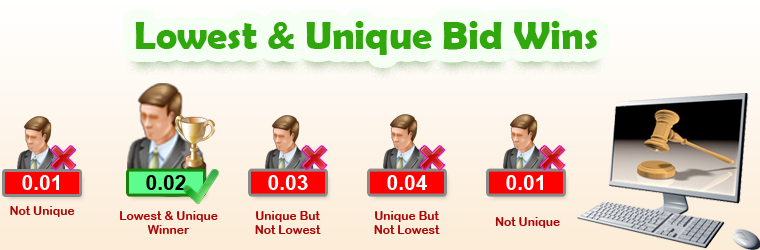
<style>
.page{position:relative;width:760px;height:250px}
.page>*{position:absolute;margin:0}
.t1{font:40px "BerlinSansFBDemi-Bold";color:#30a70c}
.t2{font:21px "Arial-BoldMT";color:#ffffff}
.t3{font:21px "Arial-BoldMT";color:#000000}
.t4{font:12px "ArialRoundedMTBold";color:#ab0707}
</style>
<div class="page">
<p class="t1" style="left:135px;top:21px;width:462px;height:34px">Lowest &amp; Unique Bid Wins</p>
<p class="t2" style="left:22px;top:175px;width:37px;height:15px">0.01</p>
<p class="t3" style="left:146px;top:175px;width:40px;height:15px">0.02</p>
<p class="t2" style="left:268px;top:175px;width:40px;height:15px">0.03</p>
<p class="t2" style="left:387px;top:175px;width:40px;height:15px">0.04</p>
<p class="t2" style="left:506px;top:175px;width:37px;height:15px">0.01</p>
<p class="t4" style="left:10px;top:206px;width:65px;height:11px">Not Unique</p>
<p class="t4" style="left:120px;top:211px;width:98px;height:23px;text-align:center">Lowest &amp; Unique Winner</p>
<p class="t4" style="left:255px;top:211px;width:66px;height:23px;text-align:center">Unique But<br>Not Lowest</p>
<p class="t4" style="left:374px;top:211px;width:66px;height:23px;text-align:center">Unique But<br>Not Lowest</p>
<p class="t4" style="left:495px;top:217px;width:65px;height:11px">Not Unique</p>
</div>
